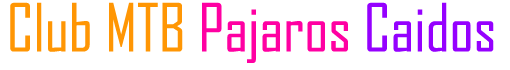
<style>
.page{position:relative;width:510px;height:70px;background:#ffffff}
.page>*{position:absolute;margin:0}
.t1{font:63.5px "AgencyFB-Reg";color:#ff9604}
.t2{font:63.5px "AgencyFB-Reg";color:#ff00a2}
.t3{font:63.5px "AgencyFB-Reg";color:#9500ff}
</style>
<div class="page">
<p class="t1" style="left:10px;top:2px;width:484px;height:61px">Club MTB <span class="t2">Pajaros </span><span class="t3">Caidos</span></p>
</div>
